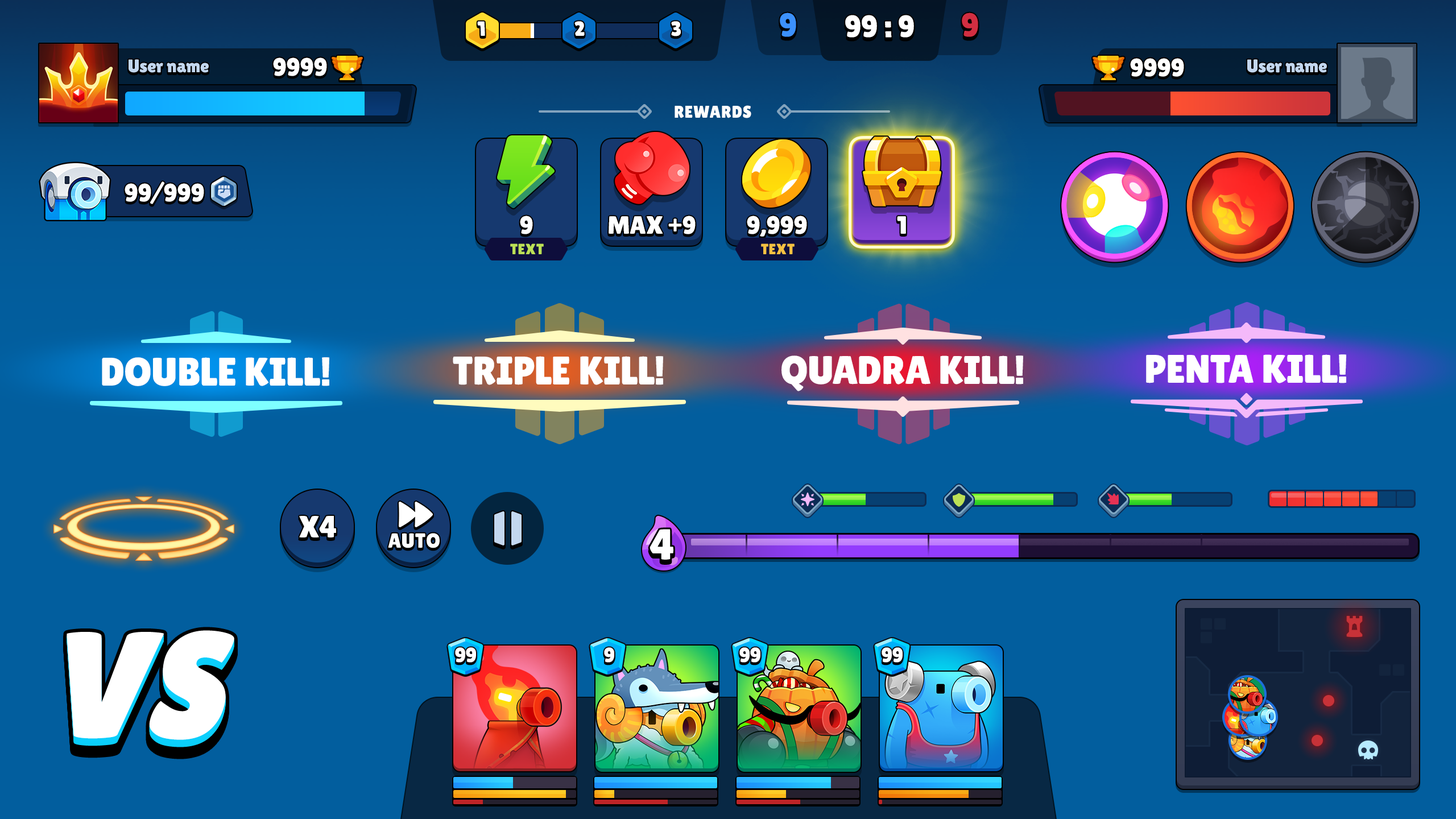
<style>
.page{position:relative;width:1456px;height:819px;background:#025e9e}
.page>*{position:absolute;margin:0}
.t1{font:33px "LilitaOne";color:#3c91fc;text-transform:uppercase}
.t2{font:30.7px "LilitaOne";color:#ffffff;text-transform:uppercase}
.t3{font:33px "LilitaOne";color:#d12e41;text-transform:uppercase}
.t4{font:20.5px "LilitaOne";color:#ffffff}
.t5{font:18.2px "LilitaOne";color:#c3d7ef}
.t6{font:25px "LilitaOne";color:#ffffff}
.t7{font:17.1px "LilitaOne";color:#ffffff;text-transform:uppercase}
.t8{font:25px "LilitaOne";color:#ffffff;text-transform:uppercase}
.t9{font:14.8px "LilitaOne";color:#bce056;text-transform:uppercase}
.t10{font:14.8px "LilitaOne";color:#f5c142;text-transform:uppercase}
.t11{font:39.8px "LilitaOne";color:#ffffff;text-transform:uppercase}
.t12{font:43.2px "LilitaOne";letter-spacing:0.02em;color:#ffffff}
.t13{font:151.7px "LilitaOne";color:#ffffff;text-transform:uppercase;font-style:italic}
.t14{font:20.5px "LilitaOne";color:#ffffff;text-transform:uppercase}
</style>
<div class="page">
<p class="t1" style="left:780px;top:13px;width:16px;height:24px">9</p>
<p class="t2" style="left:845px;top:15px;width:69px;height:23px">99 : 9</p>
<p class="t3" style="left:962px;top:13px;width:16px;height:24px">9</p>
<p class="t4" style="left:477px;top:21px;width:8px;height:15px">1</p>
<p class="t4" style="left:574px;top:21px;width:11px;height:15px">2</p>
<p class="t4" style="left:671px;top:21px;width:10px;height:15px">3</p>
<p class="t5" style="left:129px;top:59px;width:80px;height:14px">User name</p>
<p class="t6" style="left:273px;top:57px;width:54px;height:19px">9999</p>
<p class="t6" style="left:1130px;top:58px;width:54px;height:19px">9999</p>
<p class="t5" style="left:1247px;top:59px;width:80px;height:14px">User name</p>
<p class="t7" style="left:675px;top:105px;width:76px;height:13px">Rewards</p>
<p class="t6" style="left:125px;top:181px;width:79px;height:23px">99/999</p>
<p class="t8" style="left:520px;top:216px;width:13px;height:18px">9</p>
<p class="t8" style="left:609px;top:216px;width:87px;height:18px">max +9</p>
<p class="t8" style="left:747px;top:216px;width:60px;height:21px">9,999</p>
<p class="t8" style="left:897px;top:216px;width:9px;height:18px">1</p>
<p class="t9" style="left:510px;top:243px;width:34px;height:11px">text</p>
<p class="t10" style="left:761px;top:243px;width:34px;height:11px">text</p>
<p class="t11" style="left:102px;top:357px;width:227px;height:29px">Double kill!</p>
<p class="t11" style="left:453px;top:356px;width:210px;height:29px">Triple kill!</p>
<p class="t11" style="left:781px;top:355px;width:242px;height:36px">Quadra kill!</p>
<p class="t11" style="left:1146px;top:354px;width:200px;height:29px">Penta kill!</p>
<p class="t2" style="left:299px;top:516px;width:37px;height:21px">x4</p>
<p class="t4" style="left:388px;top:533px;width:52px;height:15px">AUTO</p>
<p class="t12" style="left:650px;top:529px;width:23px;height:31px">4</p>
<p class="t13" style="left:67px;top:638px;width:167px;height:109px">VS</p>
<p class="t13" style="left:67px;top:637px;width:167px;height:110px">VS</p>
<p class="t13" style="left:67px;top:636px;width:167px;height:110px">VS</p>
<p class="t13" style="left:67px;top:635px;width:167px;height:110px">VS</p>
<p class="t13" style="left:67px;top:635px;width:167px;height:109px">VS</p>
<p class="t13" style="left:67px;top:634px;width:167px;height:110px">VS</p>
<p class="t13" style="left:67px;top:633px;width:167px;height:110px">VS</p>
<p class="t13" style="left:67px;top:632px;width:167px;height:110px">VS</p>
<p class="t13" style="left:67px;top:632px;width:167px;height:110px">VS</p>
<p class="t13" style="left:67px;top:630px;width:167px;height:110px">VS</p>
<p class="t14" style="left:455px;top:647px;width:21px;height:16px">99</p>
<p class="t14" style="left:604px;top:647px;width:10px;height:16px">9</p>
<p class="t14" style="left:739px;top:647px;width:21px;height:16px">99</p>
<p class="t14" style="left:882px;top:647px;width:21px;height:16px">99</p>
</div>
